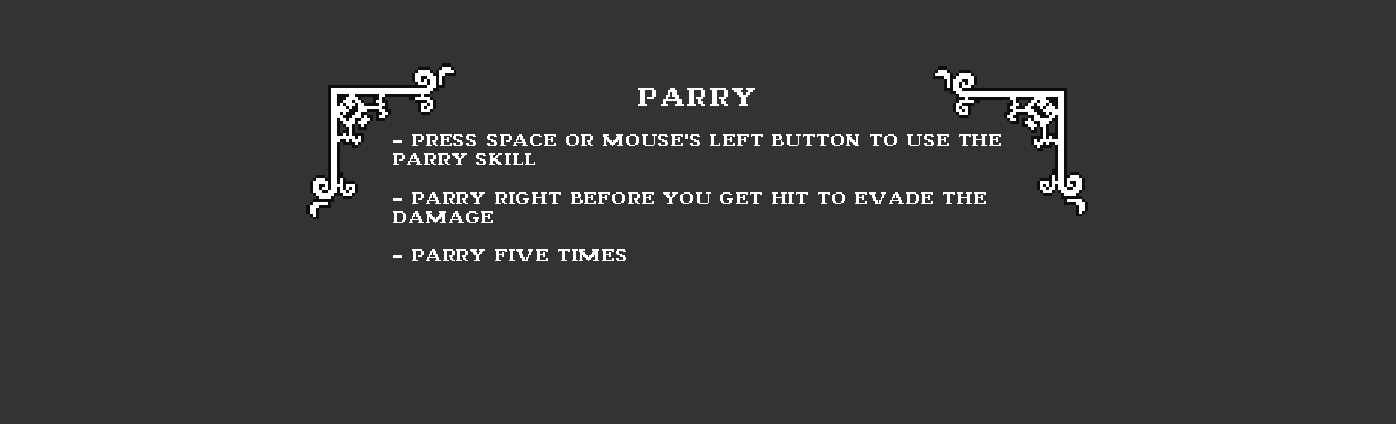
<style>
.page{position:relative;width:1396px;height:424px;background:#333333}
.page>*{position:absolute;margin:0}
.t1{font:32px "NotJamOldStyle14";letter-spacing:0.05em;color:#ffffff}
.t2{font:16px "NotJamOldStyle11";letter-spacing:0.05em;color:#ffffff}
</style>
<div class="page">
<p class="t1" style="left:638px;top:88px;width:117px;height:18px">PARRY</p>
<p class="t2" style="left:393px;top:134px;width:608px;height:127px">- PRESS SPACE OR MOUSE'S LEFT BUTTON TO USE THE <br>PARRY SKILL<br><br>- PARRY RIGHT BEFORE YOU GET HIT TO EVADE THE <br>DAMAGE<br><br>- PARRY FIVE TIMES</p>
</div>
